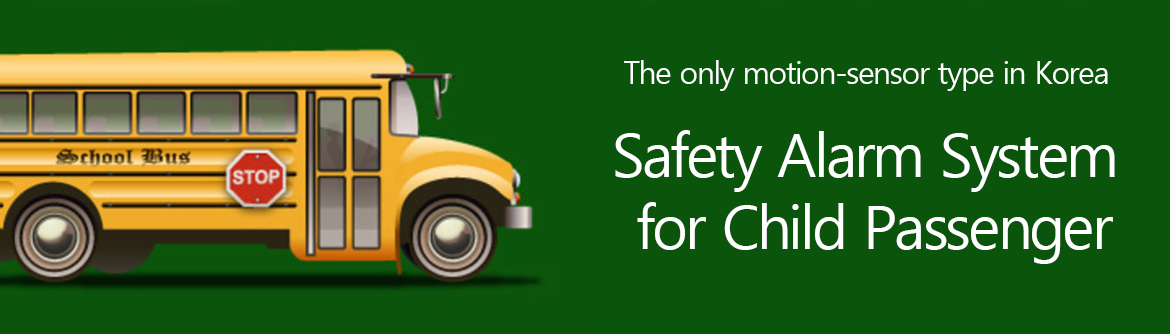
<style>
.page{position:relative;width:1170px;height:334px;background:#0b540b}
.page>*{position:absolute;margin:0}
.t1{font:31.2px "MalgunGothic";letter-spacing:-0.05em;color:#ffffff}
.t2{font:60px "MalgunGothic";letter-spacing:-0.05em;color:#ffffff}
.t3{font:50px "MalgunGothic";letter-spacing:-0.08em;color:#ffffff}
</style>
<div class="page">
<p class="t1" style="left:624px;top:60px;width:484px;height:31px">The only motion-sensor type in Korea</p>
<p class="t2" style="left:615px;top:130px;width:500px;height:134px"><span class="t3"><br></span>Safety Alarm System <br>for Child Passenger</p>
</div>
